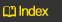
<style>
.page{position:relative;width:62px;height:22px;background:#333333}
.page>*{position:absolute;margin:0}
.t1{font:12.4px "S-CoreDream-4Regular";letter-spacing:-0.05em;color:#ffde00;font-weight:bold}
</style>
<div class="page">
<p class="t1" style="left:19px;top:5px;width:30px;height:11px">Index</p>
</div>
